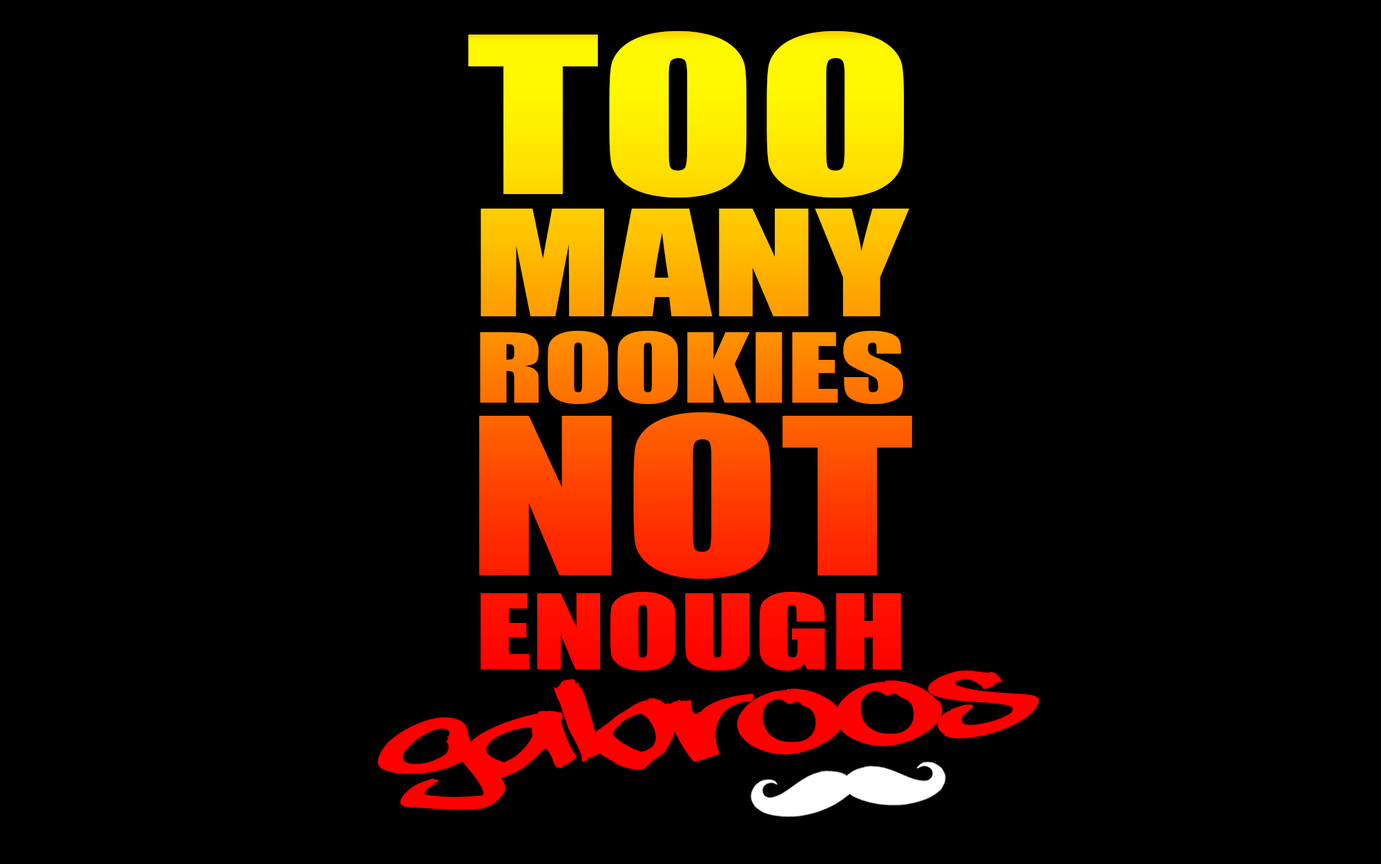
<style>
.page{position:relative;width:1381px;height:864px;background:#000000}
.page>*{position:absolute;margin:0}
.t1{font:89.2px/86.4px "Impact";text-transform:uppercase;scale:1.43 1}
.t2{font:201.5px/129.5px "Impact";text-transform:uppercase;scale:1.43 1}
.t3{font:136px/122.3px "Impact";text-transform:uppercase;scale:1.43 1}
.t4{font:201.5px/172.7px "Impact";text-transform:uppercase;scale:1.43 1}
.t5{font:95.7px/93.6px "Impact";text-transform:uppercase;scale:1.43 1}
.t6{font:1px/129.5px "Impact";text-transform:uppercase;scale:1.43 1}
.t7{font:102px "aaaiight!";color:#ff0000;text-transform:uppercase;scale:1.43 1}
</style>
<div class="page">
<p class="t1" style="left:468px;top:31px;width:444px;height:639px;text-align:center"><span class="t2">Too<br></span><span class="t3">Many<br></span>Rookies<br><span class="t4">Not<br></span><span class="t5">Enough<br><br></span><span class="t6">S</span></p>
<p class="t7" style="left:378px;top:670px;width:661px;height:140px;rotate:-5deg">Gabroos</p>
</div>
